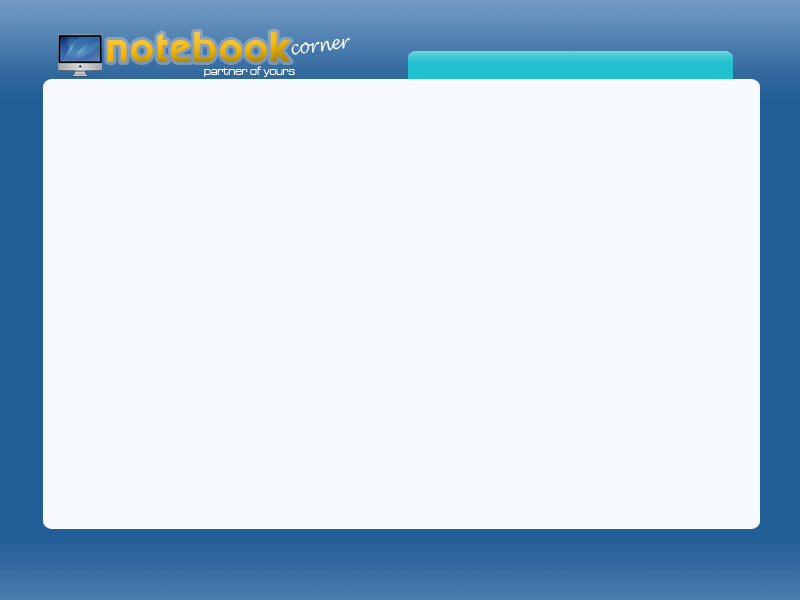
<style>
.page{position:relative;width:800px;height:600px;background:#f6fafe}
.page>*{position:absolute;margin:0}
.t1{font:41.7px "AlphaCentauri"}
.t2{font:18.9px "LucidaHandwriting-Italic";color:#ffffff;scale:0.84 1}
.t3{font:12.1px "MicrogrammaD-MediExte";color:#ffffff;scale:0.85 1}
</style>
<div class="page">
<p class="t1" style="left:107px;top:32px;width:184px;height:30px">notebook</p>
<p class="t2" style="left:291px;top:37px;width:59px;height:18px;rotate:-8deg">corner</p>
<p class="t3" style="left:204px;top:66px;width:91px;height:11px">partner of yours</p>
</div>
